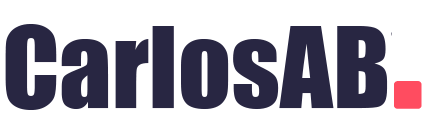
<style>
.page{position:relative;width:446px;height:138px;background:#ffffff}
.page>*{position:absolute;margin:0}
.t1{font:104.3px "Impact";color:#282642}
</style>
<div class="page">
<p class="t1" style="left:5px;top:24px;width:383px;height:86px">CarlosAB</p>
</div>
